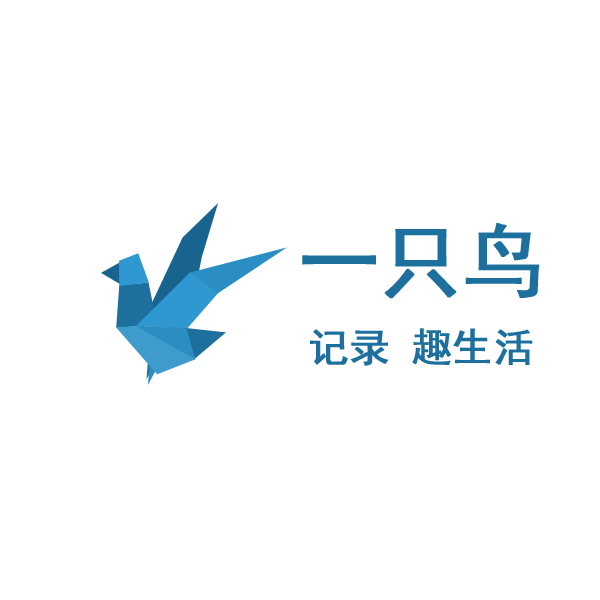
<style>
.page{position:relative;width:600px;height:600px;background:#ffffff}
.page>*{position:absolute;margin:0}
.t1{font:40px/72px "SimHei";color:#1d709d;font-weight:bold}
.t2{font:80px/72px "SimHei";color:#1d709d;font-weight:bold}
</style>
<div class="page">
<p class="t1" style="left:302px;top:223px;width:238px;height:143px;text-align:center"><span class="t2">一只鸟<br></span>记录 趣生活</p>
</div>
